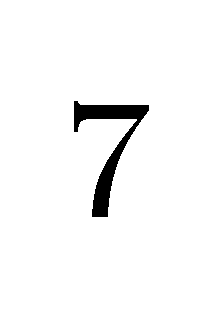
<style>
.page{position:relative;width:222px;height:323px;background:#ffffff}
.page>*{position:absolute;margin:0}
.t1{font:180px "FootlightMTLight";color:#000000}
</style>
<div class="page">
<p class="t1" style="left:74px;top:101px;width:75px;height:116px">7</p>
</div>
